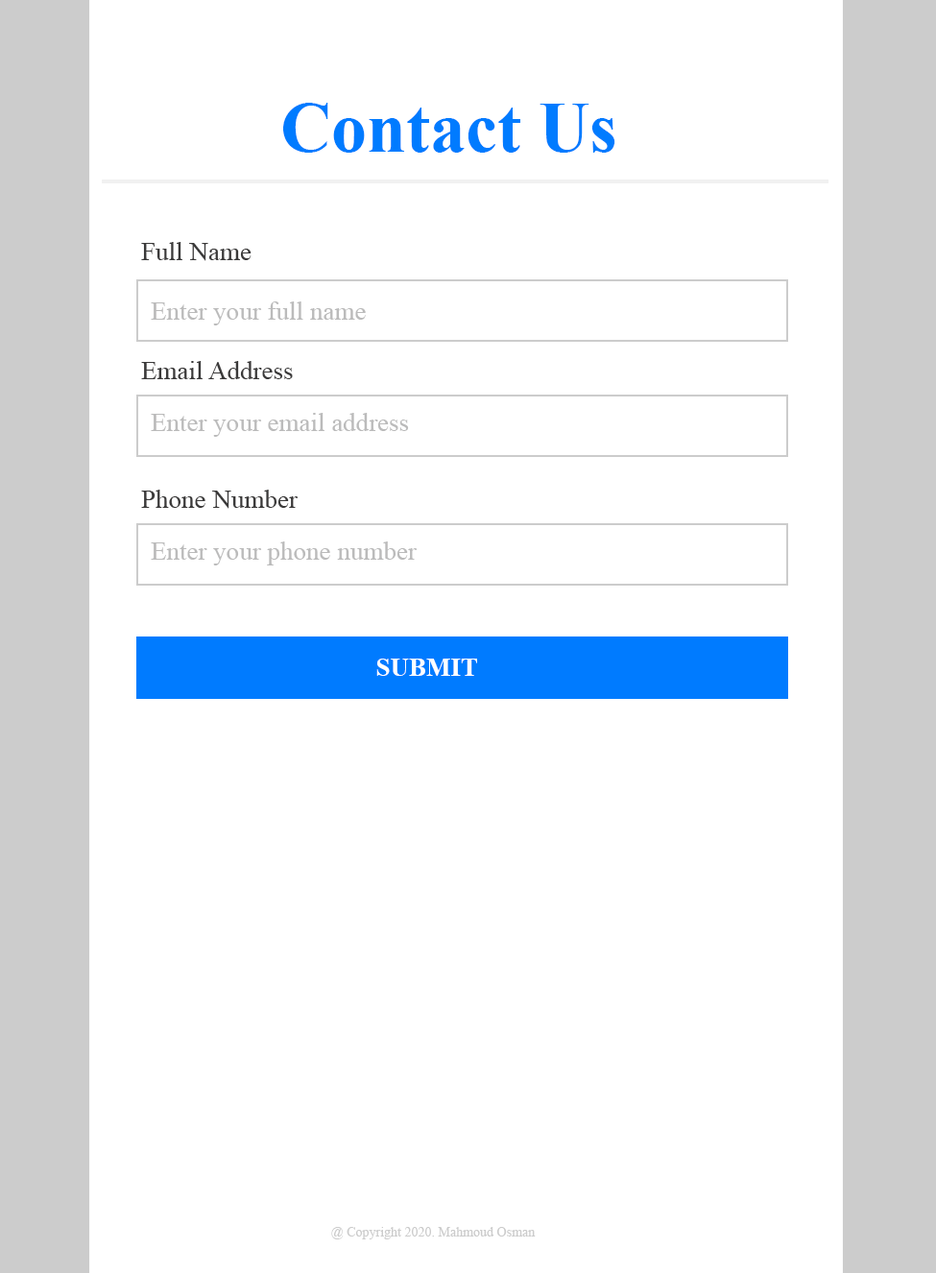
<style>
.page{position:relative;width:936px;height:1273px;background:#ffffff}
.page>*{position:absolute;margin:0}
.t1{font:71.1px "TimesNewRomanPS-BoldMT";color:#007bff}
.t2{font:25.9px "TimesNewRomanPSMT";color:#3a3939}
.t3{font:25.9px "TimesNewRomanPSMT";color:#bbbbbb}
.t4{font:25.9px "TimesNewRomanPS-BoldMT";color:#ffffff}
.t5{font:13.5px "TimesNewRomanPSMT";color:#cccccc}
</style>
<div class="page">
<p class="t1" style="left:283px;top:103px;width:333px;height:50px">Contact Us</p>
<p class="t2" style="left:141px;top:242px;width:111px;height:19px">Full Name</p>
<p class="t3" style="left:151px;top:302px;width:215px;height:24px">Enter your full name</p>
<p class="t2" style="left:141px;top:361px;width:152px;height:18px">Email Address</p>
<p class="t3" style="left:151px;top:413px;width:258px;height:24px">Enter your email address</p>
<p class="t2" style="left:141px;top:490px;width:158px;height:19px">Phone Number</p>
<p class="t3" style="left:151px;top:542px;width:267px;height:24px">Enter your phone number</p>
<p class="t4" style="left:376px;top:659px;width:101px;height:17px">SUBMIT</p>
<p class="t5" style="left:331px;top:1227px;width:205px;height:13px">@ Copyright 2020. Mahmoud Osman</p>
</div>
